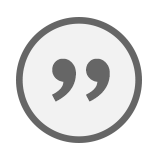
<style>
.page{position:relative;width:160px;height:160px;background:#ffffff}
.page>*{position:absolute;margin:0}
.t1{font:189.6px "AndaleMono";color:#666666;text-transform:uppercase}
</style>
<div class="page">
<p class="t1" style="left:52px;top:58px;width:58px;height:44px;rotate:180deg">“</p>
</div>
